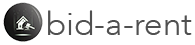
<style>
.page{position:relative;width:195px;height:45px;background:#ffffff}
.page>*{position:absolute;margin:0}
.t1{font:33.3px "Avenir-Light";color:#505050}
</style>
<div class="page">
<p class="t1" style="left:48px;top:10px;width:144px;height:25px">bid-a-rent</p>
</div>
